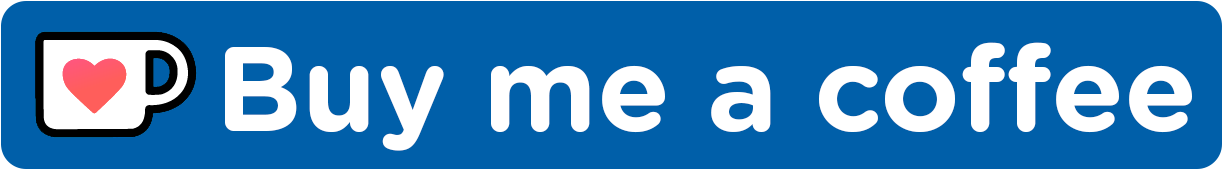
<style>
.page{position:relative;width:1223px;height:170px;background:#005fa9}
.page>*{position:absolute;margin:0}
.t1{font:120px "GothamRounded-Bold";color:#ffffff}
</style>
<div class="page">
<p class="t1" style="left:225px;top:42px;width:967px;height:109px">Buy me a coffee</p>
</div>
